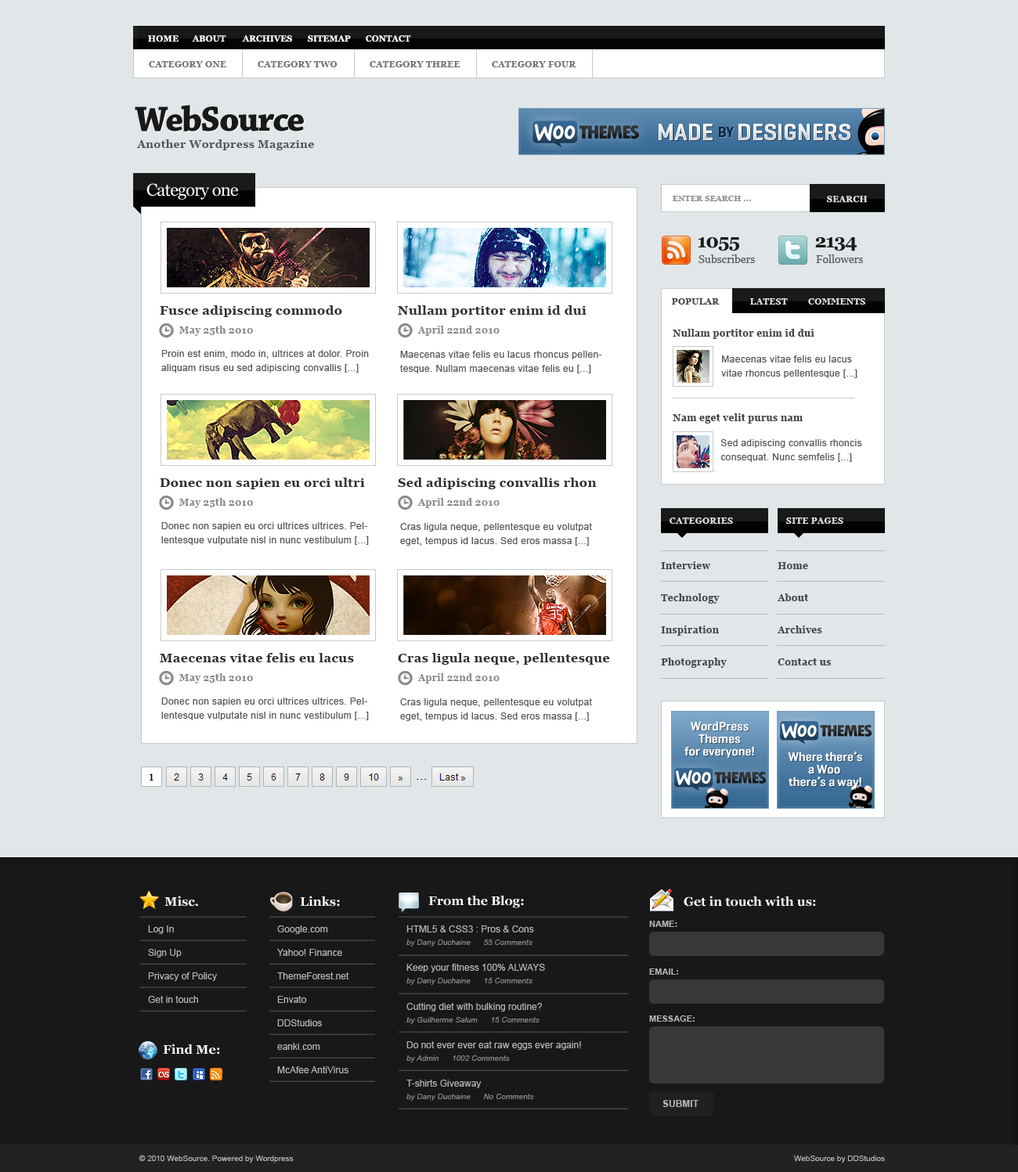
<style>
.page{position:relative;width:1018px;height:1172px;background:#e1e6e9}
.page>*{position:absolute;margin:0}
.t1{font:8.6px "Georgia-Bold";letter-spacing:0.029em;color:#ffffff}
.t2{font:8.6px "Georgia-Bold";color:#ffffff}
.t3{font:8.6px "Georgia-Bold";letter-spacing:0.029em;color:#717171}
.t4{font:36.8px "ChaparralPro-Bold";letter-spacing:-0.04em;color:#191919}
.t5{font:11px "Georgia-Bold";letter-spacing:0.029em;color:#555555}
.t6{font:17.2px "Georgia";letter-spacing:-0.04em;color:#ffffff}
.t7{font:7.7px "Georgia-Bold";letter-spacing:0.029em;color:#8d8d8d}
.t8{font:8.6px "Georgia-Bold";letter-spacing:0.029em;color:#e4e4e4}
.t9{font:18.8px "Georgia-Bold";letter-spacing:-0.04em;color:#191919}
.t10{font:11px "Georgia";color:#5e5e5e}
.t11{font:12.5px "Georgia-Bold";letter-spacing:0.029em;color:#2f2f2f}
.t12{font:8.6px "Georgia-Bold";letter-spacing:0.029em;color:#464646}
.t13{font:9.4px "Georgia-Bold";letter-spacing:0.029em;color:#898989}
.t14{font:9.4px "Georgia-Bold";letter-spacing:0.029em;color:#424242}
.t15{font:9.4px/14.1px "ArialMT";letter-spacing:0.029em;color:#575757}
.t16{font:9.4px "Georgia-Bold";letter-spacing:0.029em;color:#464646}
.t17{font:12.5px "Georgia-Bold";color:#ffffff}
.t18{font:9.4px "ArialMT";color:#b6b6b6}
.t19{font:7.8px/12.5px "Arial-ItalicMT";color:#858484}
.t20{font:9.4px/12.5px "ArialMT";color:#b6b6b6}
.t21{font:8.6px "Arial-BoldMT";color:#b6b6b6}
.t22{font:7.8px/12.5px "Arial-ItalicMT";color:#858585}
.t23{font:9.4px "Arial-BoldMT";color:#b6b6b6}
.t24{font:7.8px "ArialMT";color:#b6b6b6}
</style>
<div class="page">
<p class="t1" style="left:148px;top:35px;width:30px;height:7px">HOME</p>
<p class="t2" style="left:192px;top:35px;width:34px;height:7px">ABOUT</p>
<p class="t2" style="left:242px;top:35px;width:50px;height:7px">ARCHIVES</p>
<p class="t2" style="left:308px;top:35px;width:43px;height:7px">SITEMAP</p>
<p class="t2" style="left:366px;top:35px;width:45px;height:7px">CONTACT</p>
<p class="t3" style="left:149px;top:61px;width:77px;height:6px">CATEGORY ONE</p>
<p class="t3" style="left:258px;top:61px;width:79px;height:6px">CATEGORY TWO</p>
<p class="t3" style="left:369px;top:61px;width:91px;height:6px">CATEGORY THREE</p>
<p class="t3" style="left:492px;top:61px;width:84px;height:6px">CATEGORY FOUR</p>
<p class="t4" style="left:135px;top:105px;width:169px;height:27px">WebSource</p>
<p class="t4" style="left:135px;top:106px;width:169px;height:26px">WebSource</p>
<p class="t5" style="left:137px;top:139px;width:177px;height:11px">Another Wordpress Magazine</p>
<p class="t6" style="left:146px;top:183px;width:92px;height:17px">Category one</p>
<p class="t7" style="left:672px;top:196px;width:79px;height:5px">ENTER SEARCH ...</p>
<p class="t8" style="left:827px;top:196px;width:40px;height:7px">SEARCH</p>
<p class="t9" style="left:697px;top:237px;width:42px;height:14px">1055</p>
<p class="t9" style="left:815px;top:237px;width:41px;height:14px">2134</p>
<p class="t10" style="left:698px;top:254px;width:57px;height:9px">Subscribers</p>
<p class="t10" style="left:816px;top:254px;width:47px;height:9px">Followers</p>
<p class="t11" style="left:160px;top:305px;width:182px;height:12px">Fusce adipiscing commodo</p>
<p class="t11" style="left:398px;top:305px;width:188px;height:12px">Nullam portitor enim id dui</p>
<p class="t12" style="left:672px;top:298px;width:47px;height:6px">POPULAR</p>
<p class="t8" style="left:750px;top:298px;width:37px;height:6px">LATEST</p>
<p class="t8" style="left:808px;top:298px;width:57px;height:6px">COMMENTS</p>
<p class="t13" style="left:179px;top:326px;width:74px;height:10px">May 25th 2010</p>
<p class="t13" style="left:417px;top:326px;width:82px;height:10px">April 22nd 2010</p>
<p class="t14" style="left:672px;top:329px;width:142px;height:10px">Nullam portitor enim id dui</p>
<p class="t15" style="left:161px;top:350px;width:208px;height:23px">Proin est enim, modo in, ultrices at dolor. Proin aliquam risus eu sed adipiscing convallis [...]</p>
<p class="t15" style="left:400px;top:351px;width:202px;height:22px">Maecenas vitae felis eu lacus rhoncus pellentesque. Nullam maecenas vitae felis eu [...]</p>
<p class="t15" style="left:721px;top:355px;width:136px;height:23px">Maecenas vitae felis eu lacus vitae rhoncus pellentesque [...]</p>
<p class="t14" style="left:672px;top:413px;width:130px;height:10px">Nam eget velit purus nam</p>
<p class="t15" style="left:720px;top:439px;width:142px;height:23px">Sed adipiscing convallis rhoncis consequat. Nunc semfelis [...]</p>
<p class="t11" style="left:160px;top:477px;width:205px;height:12px">Donec non sapien eu orci ultri</p>
<p class="t11" style="left:398px;top:477px;width:198px;height:12px">Sed adipiscing convallis rhon</p>
<p class="t13" style="left:179px;top:498px;width:74px;height:10px">May 25th 2010</p>
<p class="t13" style="left:417px;top:498px;width:82px;height:10px">April 22nd 2010</p>
<p class="t8" style="left:669px;top:517px;width:64px;height:7px">CATEGORIES</p>
<p class="t8" style="left:786px;top:517px;width:57px;height:7px">SITE PAGES</p>
<p class="t15" style="left:161px;top:522px;width:208px;height:23px">Donec non sapien eu orci ultrices ultrices. Pellentesque vulputate nisl in nunc vestibulum [...]</p>
<p class="t15" style="left:400px;top:523px;width:192px;height:23px">Cras ligula neque, pellentesque eu volutpat eget, tempus id lacus. Sed eros massa [...]</p>
<p class="t16" style="left:661px;top:561px;width:49px;height:8px">Interview</p>
<p class="t16" style="left:777px;top:562px;width:31px;height:7px">Home</p>
<p class="t16" style="left:661px;top:593px;width:58px;height:11px">Technology</p>
<p class="t16" style="left:777px;top:593px;width:31px;height:8px">About</p>
<p class="t16" style="left:661px;top:625px;width:58px;height:11px">Inspiration</p>
<p class="t16" style="left:777px;top:625px;width:45px;height:8px">Archives</p>
<p class="t11" style="left:160px;top:653px;width:194px;height:9px">Maecenas vitae felis eu lacus</p>
<p class="t11" style="left:398px;top:653px;width:212px;height:12px">Cras ligula neque, pellentesque</p>
<p class="t16" style="left:661px;top:658px;width:65px;height:10px">Photography</p>
<p class="t16" style="left:777px;top:658px;width:54px;height:7px">Contact us</p>
<p class="t13" style="left:179px;top:673px;width:74px;height:10px">May 25th 2010</p>
<p class="t13" style="left:417px;top:673px;width:82px;height:10px">April 22nd 2010</p>
<p class="t15" style="left:161px;top:697px;width:208px;height:23px">Donec non sapien eu orci ultrices ultrices. Pellentesque vulputate nisl in nunc vestibulum [...]</p>
<p class="t15" style="left:400px;top:698px;width:192px;height:23px">Cras ligula neque, pellentesque eu volutpat eget, tempus id lacus. Sed eros massa [...]</p>
<p class="t17" style="left:164px;top:895px;width:34px;height:11px">Misc.</p>
<p class="t17" style="left:300px;top:895px;width:40px;height:11px">Links:</p>
<p class="t17" style="left:428px;top:895px;width:96px;height:13px">From the Blog:</p>
<p class="t17" style="left:683px;top:895px;width:133px;height:11px">Get in touch with us:</p>
<p class="t18" style="left:148px;top:925px;width:26px;height:9px">Log In</p>
<p class="t18" style="left:277px;top:925px;width:51px;height:9px">Google.com</p>
<p class="t19" style="left:406px;top:925px;width:128px;height:21px"><span class="t20">HTML5 &amp; CSS3 : Pros &amp; Cons<br></span>by Dany Duchaine      55 Comments</p>
<p class="t21" style="left:649px;top:921px;width:28px;height:6px">NAME:</p>
<p class="t18" style="left:148px;top:949px;width:34px;height:8px">Sign Up</p>
<p class="t18" style="left:277px;top:949px;width:65px;height:7px">Yahoo! Finance</p>
<p class="t22" style="left:406px;top:964px;width:139px;height:21px"><span class="t20">Keep your fitness 100% ALWAYS<br></span>by Dany Duchaine      15 Comments</p>
<p class="t18" style="left:148px;top:972px;width:69px;height:9px">Privacy of Policy</p>
<p class="t18" style="left:277px;top:972px;width:72px;height:7px">ThemeForest.net</p>
<p class="t21" style="left:649px;top:968px;width:29px;height:7px">EMAIL:</p>
<p class="t18" style="left:148px;top:996px;width:50px;height:7px">Get in touch</p>
<p class="t18" style="left:277px;top:996px;width:30px;height:7px">Envato</p>
<p class="t22" style="left:406px;top:1003px;width:136px;height:21px"><span class="t20">Cutting diet with bulking routine?<br></span>by Guilherme Salum      15 Comments</p>
<p class="t18" style="left:277px;top:1019px;width:45px;height:7px">DDStudios</p>
<p class="t21" style="left:649px;top:1015px;width:45px;height:7px">MESSAGE:</p>
<p class="t17" style="left:163px;top:1043px;width:57px;height:11px">Find Me:</p>
<p class="t18" style="left:277px;top:1043px;width:43px;height:7px">eanki.com</p>
<p class="t20" style="left:406px;top:1041px;width:175px;height:21px">Do not ever ever eat raw eggs ever again!<br><span class="t22">by Admin      1002 Comments</span></p>
<p class="t18" style="left:277px;top:1066px;width:71px;height:7px">McAfee AntiVirus</p>
<p class="t22" style="left:406px;top:1079px;width:128px;height:22px"><span class="t20">T-shirts Giveaway<br></span>by Dany Duchaine      No Comments</p>
<p class="t23" style="left:662px;top:1100px;width:36px;height:7px">SUBMIT</p>
<p class="t24" style="left:139px;top:1155px;width:155px;height:7px">© 2010 WebSource. Powered by Wordpress</p>
<p class="t24" style="left:794px;top:1155px;width:91px;height:7px">WebSource by DDStudios</p>
</div>
